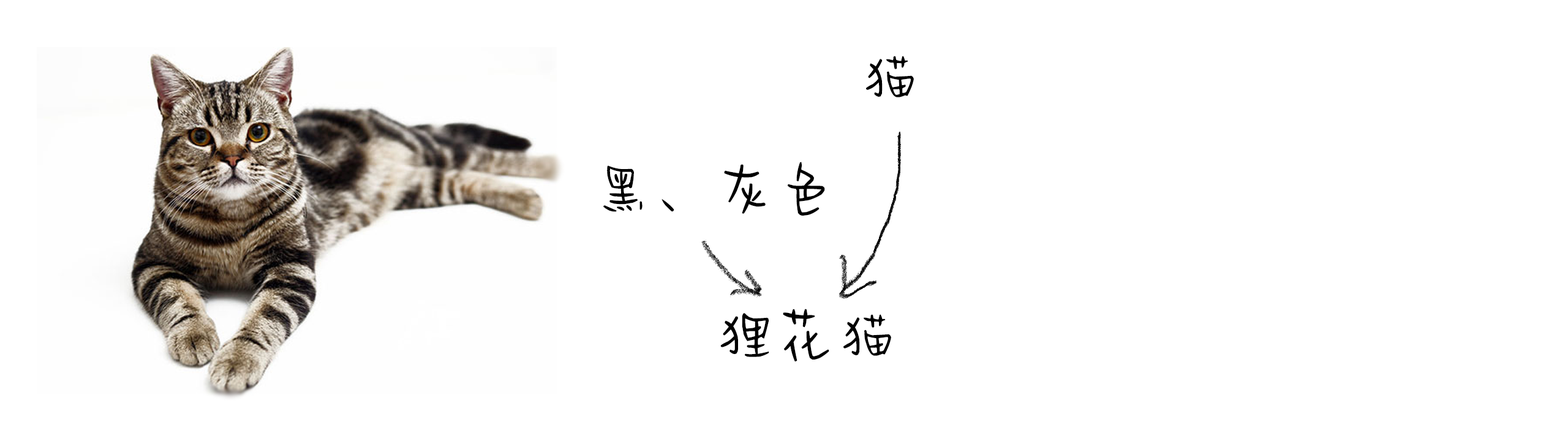
<style>
.page{position:relative;width:1568px;height:441px;background:#ffffff}
.page>*{position:absolute;margin:0}
.t1{font:58.8px "FZSJ-GUOJYJBHKAG";letter-spacing:0.04em;color:#000000}
</style>
<div class="page">
<p class="t1" style="left:866px;top:56px;width:48px;height:41px">猫</p>
<p class="t1" style="left:603px;top:162px;width:222px;height:54px">黑、灰色</p>
<p class="t1" style="left:720px;top:309px;width:171px;height:52px">狸花猫</p>
</div>
